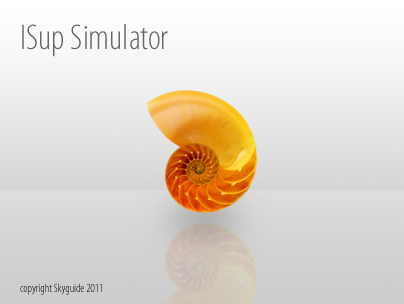
<style>
.page{position:relative;width:404px;height:304px}
.page>*{position:absolute;margin:0}
.t1{font:36px "MyriadPro-LightCond";color:#666666}
.t2{font:12px "MyriadPro-LightCond"}
</style>
<div class="page">
<p class="t1" style="left:22px;top:24px;width:146px;height:33px">ISup Simulator</p>
<p class="t2" style="left:20px;top:283px;width:82px;height:12px">copyright Skyguide 2011</p>
</div>
